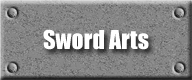
<style>
.page{position:relative;width:192px;height:80px}
.page>*{position:absolute;margin:0}
.t1{font:24px "Impact";color:#ffffff}
</style>
<div class="page">
<p class="t1" style="left:43px;top:29px;width:106px;height:21px">Sword Arts</p>
</div>
